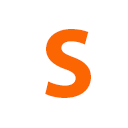
<style>
.page{position:relative;width:128px;height:128px;background:#ffffff}
.page>*{position:absolute;margin:0}
.t1{font:100px "MyriadPro-Bold";color:#fb6603}
</style>
<div class="page">
<p class="t1" style="left:45px;top:29px;width:46px;height:69px">S</p>
</div>
